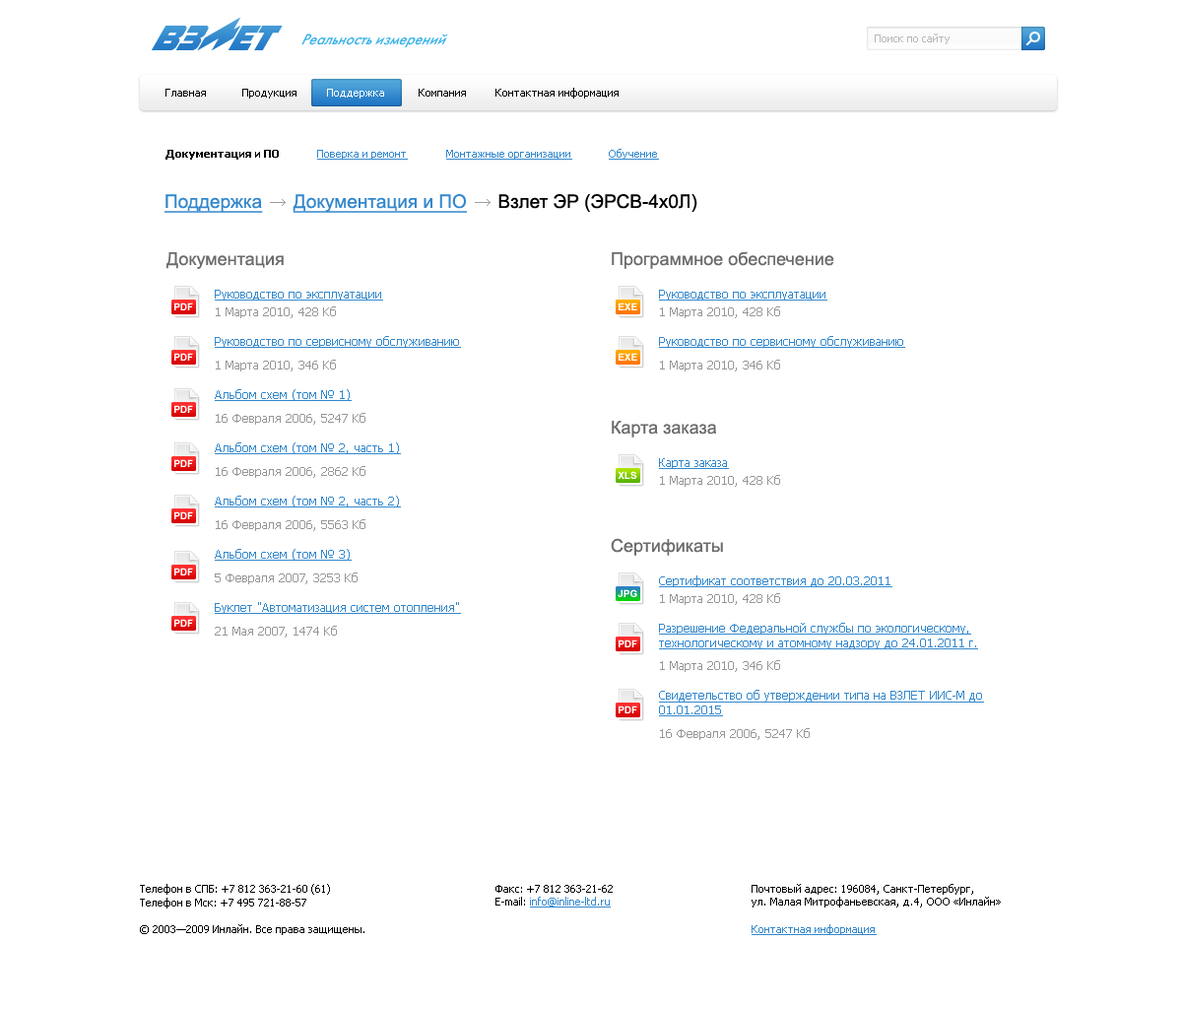
<style>
.page{position:relative;width:1182px;height:1009px;background:#ffffff}
.page>*{position:absolute;margin:0}
.t1{font:15.7px "FuturisC-Italic";color:#3cb3e8;scale:0.94 1}
.t2{font:10.8px "Tahoma";color:#b7b6b6}
.t3{font:10.8px "Tahoma";color:#000000}
.t4{font:10.8px "Tahoma";color:#ffffff}
.t5{font:10.8px "Tahoma-Bold";color:#000000}
.t6{font:10.8px "Tahoma";color:#3287cc;text-decoration:underline}
.t7{font:18.7px "ArialMT";color:#3287cc;text-decoration:underline}
.t8{font:18.7px "ArialMT";color:#000000}
.t9{font:17.7px "ArialMT";color:#6b6b6b}
.t10{font:11.8px/29.5px "Tahoma";color:#3287cc;text-decoration:underline}
.t11{font:11.8px/23.6px "Tahoma";color:#3287cc;text-decoration:underline}
.t12{font:11.8px/17.7px "Tahoma";color:#969696}
.t13{font:11.8px/23.6px "Tahoma";color:#969696}
.t14{font:9.8px "Arial-BoldMT";color:#ffffff}
.t15{font:11.8px "Tahoma";color:#3287cc;text-decoration:underline}
.t16{font:14.8px "Arial-BoldMT";color:#000000}
</style>
<div class="page">
<p class="t1" style="left:301px;top:33px;width:147px;height:14px">Реальность измерений</p>
<p class="t2" style="left:875px;top:33px;width:75px;height:11px">Поиск по сайту</p>
<p class="t3" style="left:165px;top:89px;width:41px;height:8px">Главная</p>
<p class="t3" style="left:242px;top:89px;width:55px;height:10px">Продукция</p>
<p class="t4" style="left:327px;top:89px;width:57px;height:10px">Поддержка</p>
<p class="t3" style="left:419px;top:89px;width:47px;height:8px">Компания</p>
<p class="t3" style="left:496px;top:88px;width:123px;height:11px">Контактная информация</p>
<p class="t5" style="left:165px;top:150px;width:114px;height:10px">Документация и ПО</p>
<p class="t6" style="left:317px;top:150px;width:91px;height:10px">Поверка и ремонт</p>
<p class="t6" style="left:446px;top:150px;width:126px;height:10px">Монтажные организации</p>
<p class="t6" style="left:609px;top:149px;width:50px;height:11px">Обучение</p>
<p class="t7" style="left:165px;top:194px;width:532px;height:19px">Поддержка      Документация и ПО<span class="t8">      Взлет ЭР (ЭРСВ-4х0Л)</span></p>
<p class="t9" style="left:166px;top:252px;width:118px;height:17px">Документация</p>
<p class="t9" style="left:612px;top:251px;width:222px;height:18px">Программное обеспечение</p>
<p class="t10" style="left:215px;top:290px;width:246px;height:347px"><span class="t11">Руководство по эксплуатации<br></span><span class="t12">1 Марта 2010, 428 Kб<br></span>Руководство по сервисному обслуживанию<br><span class="t13">1 Марта 2010, 346 Kб<br></span>Альбом схем (том № 1)<br><span class="t13">16 Февраля 2006, 5247 Kб<br></span>Альбом схем (том № 2, часть 1)<br><span class="t13">16 Февраля 2006, 2862 Kб<br></span>Альбом схем (том № 2, часть 2)<br><span class="t13">16 Февраля 2006, 5563 Kб<br></span>Альбом схем (том № 3)<br><span class="t13">5 Февраля 2007, 3253 Kб<br></span>Буклет "Автоматизация систем отопления"<br><span class="t13">21 Мая 2007, 1474 Kб</span></p>
<p class="t10" style="left:659px;top:290px;width:246px;height:81px"><span class="t11">Руководство по эксплуатации<br></span><span class="t12">1 Марта 2010, 428 Kб<br></span>Руководство по сервисному обслуживанию<br><span class="t13">1 Марта 2010, 346 Kб</span></p>
<p class="t14" style="left:174px;top:302px;width:19px;height:8px">PDF</p>
<p class="t14" style="left:619px;top:302px;width:18px;height:8px">EXE</p>
<p class="t14" style="left:174px;top:353px;width:19px;height:8px">PDF</p>
<p class="t14" style="left:619px;top:353px;width:18px;height:8px">EXE</p>
<p class="t14" style="left:174px;top:405px;width:19px;height:8px">PDF</p>
<p class="t9" style="left:612px;top:421px;width:104px;height:16px">Карта заказа</p>
<p class="t14" style="left:174px;top:459px;width:19px;height:8px">PDF</p>
<p class="t12" style="left:659px;top:458px;width:121px;height:29px"><span class="t11">Карта заказа<br></span>1 Марта 2010, 428 Kб</p>
<p class="t14" style="left:618px;top:471px;width:19px;height:8px">XLS</p>
<p class="t14" style="left:174px;top:511px;width:19px;height:8px">PDF</p>
<p class="t9" style="left:611px;top:538px;width:112px;height:18px">Сертификаты</p>
<p class="t14" style="left:174px;top:567px;width:19px;height:8px">PDF</p>
<p class="t15" style="left:659px;top:575px;width:325px;height:165px"><span class="t11">Сертификат соответствия до 20.03.2011<br></span><span class="t12">1 Марта 2010, 428 Kб<br></span><span class="t10">Разрешение Федеральной службы по экологическому, </span>технологическому и атомному надзору до 24.01.2011 г.<br><span class="t13">1 Марта 2010, 346 Kб<br></span><span class="t10">Свидетельство об утверждении типа на ВЗЛЕТ ИИС-М до </span>01.01.2015<br><span class="t13">16 Февраля 2006, 5247 Kб</span></p>
<p class="t14" style="left:618px;top:589px;width:19px;height:8px">JPG</p>
<p class="t14" style="left:174px;top:619px;width:19px;height:8px">PDF</p>
<p class="t14" style="left:619px;top:639px;width:18px;height:8px">PDF</p>
<p class="t14" style="left:619px;top:705px;width:18px;height:8px">PDF</p>
<p class="t3" style="left:140px;top:884px;width:190px;height:24px">Телефон в СПБ: +7 812 363-21-60 (61)<br>Телефон в Мск: +7 495 721-88-57</p>
<p class="t3" style="left:496px;top:885px;width:117px;height:22px"><span class="t16"><br><br></span>Факс: +7 812 363-21-62<br>E-mail: <span class="t6">info@inline-ltd.ru</span></p>
<p class="t3" style="left:752px;top:884px;width:249px;height:23px"><span class="t16"><br><br></span>Почтовый адрес: 196084, Санкт-Петербург,<br>ул. Малая Митрофаньевская, д.4, ООО «Инлайн»</p>
<p class="t3" style="left:140px;top:924px;width:224px;height:11px">© 2003—2009 Инлайн. Все права защищены.</p>
<p class="t6" style="left:752px;top:924px;width:125px;height:11px">Контактная информация</p>
</div>
